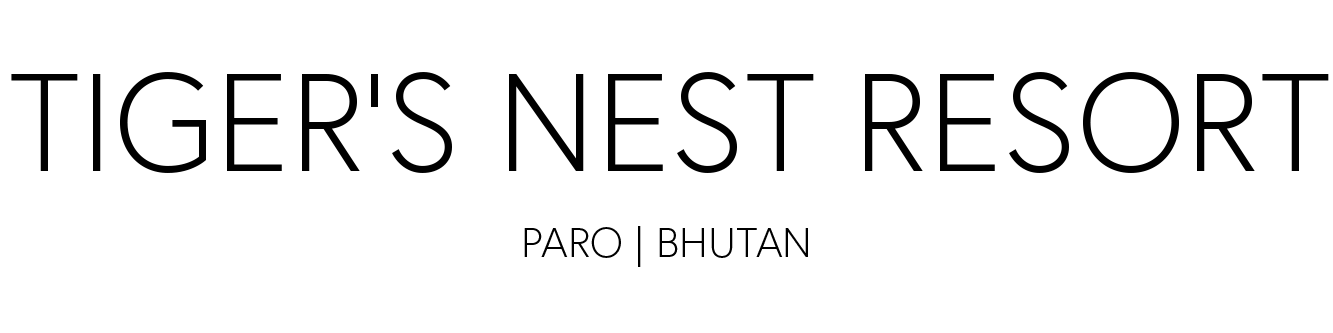
<style>
.page{position:relative;width:1333px;height:333px;background:#ffffff}
.page>*{position:absolute;margin:0}
.t1{font:138.8px "Europa-Light";color:#000000;text-transform:uppercase}
.t2{font:41.6px "Europa-Light";color:#000000;text-transform:uppercase}
</style>
<div class="page">
<p class="t1" style="left:11px;top:72px;width:1318px;height:101px">TIGER’s Nest Resort</p>
<p class="t2" style="left:524px;top:226px;width:284px;height:41px">Paro | Bhutan</p>
</div>
